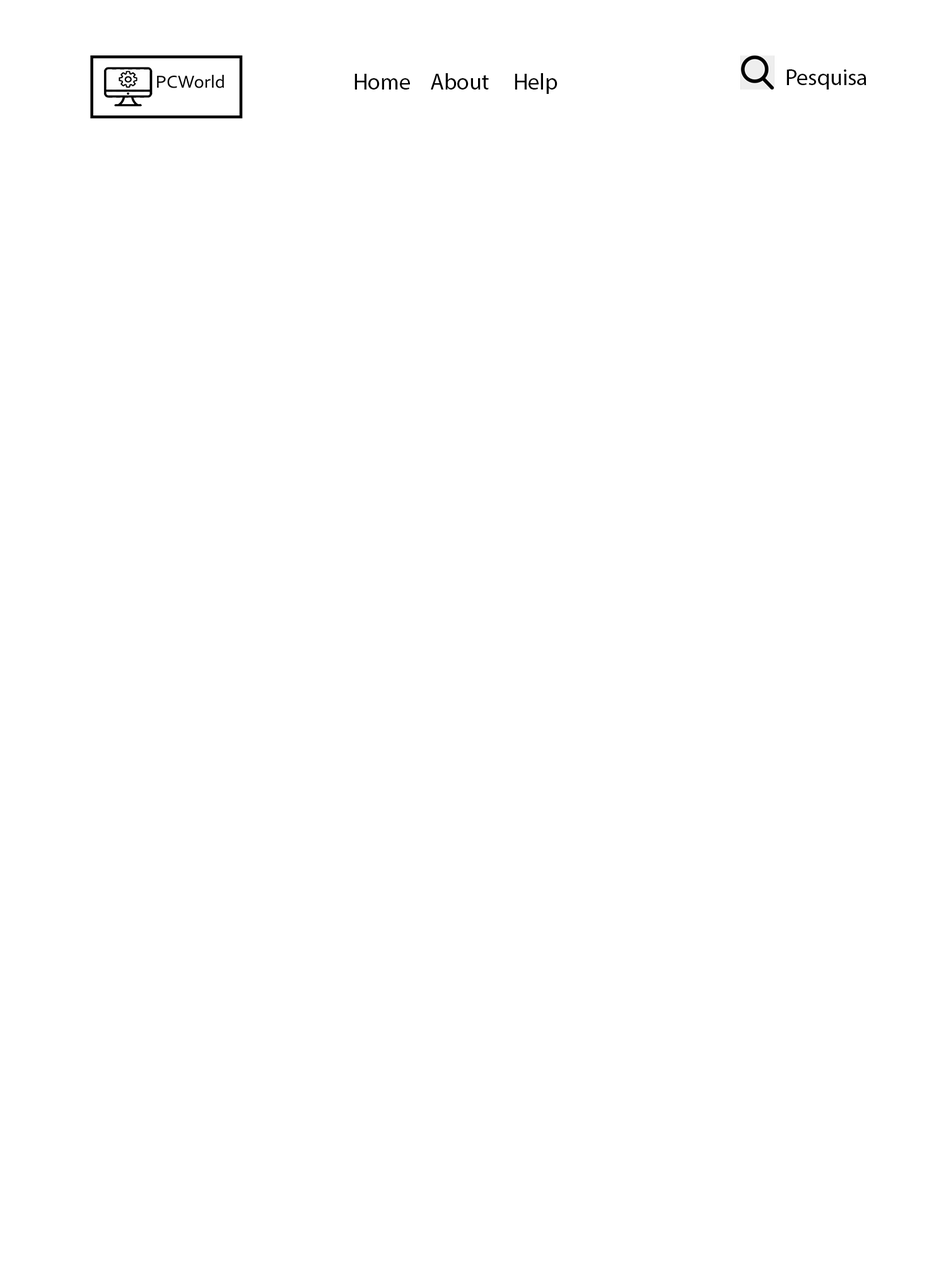
<style>
.page{position:relative;width:946px;height:1261px;background:#ffffff}
.page>*{position:absolute;margin:0}
.t1{font:22.7px "MyriadPro-Regular";color:#000000}
</style>
<div class="page">
<p class="t1" style="left:354px;top:73px;width:203px;height:21px">Home    About     Help</p>
<p class="t1" style="left:786px;top:69px;width:80px;height:21px">Pesquisa</p>
</div>
